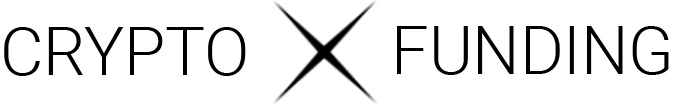
<style>
.page{position:relative;width:674px;height:104px;background:#ffffff}
.page>*{position:absolute;margin:0}
.t1{font:66.7px "Roboto-Light";color:#000000}
</style>
<div class="page">
<p class="t1" style="left:4px;top:27px;width:242px;height:49px">CRYPTO</p>
<p class="t1" style="left:397px;top:26px;width:272px;height:49px">FUNDING</p>
</div>
